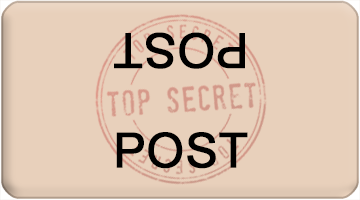
<style>
.page{position:relative;width:360px;height:200px;background:#e8d0bb}
.page>*{position:absolute;margin:0}
.t1{font:48px "ArialMT";color:#000000;font-weight:bold}
</style>
<div class="page">
<p class="t1" style="left:114px;top:32px;width:131px;height:37px;rotate:180deg">POST</p>
<p class="t1" style="left:116px;top:132px;width:132px;height:37px">POST</p>
</div>
